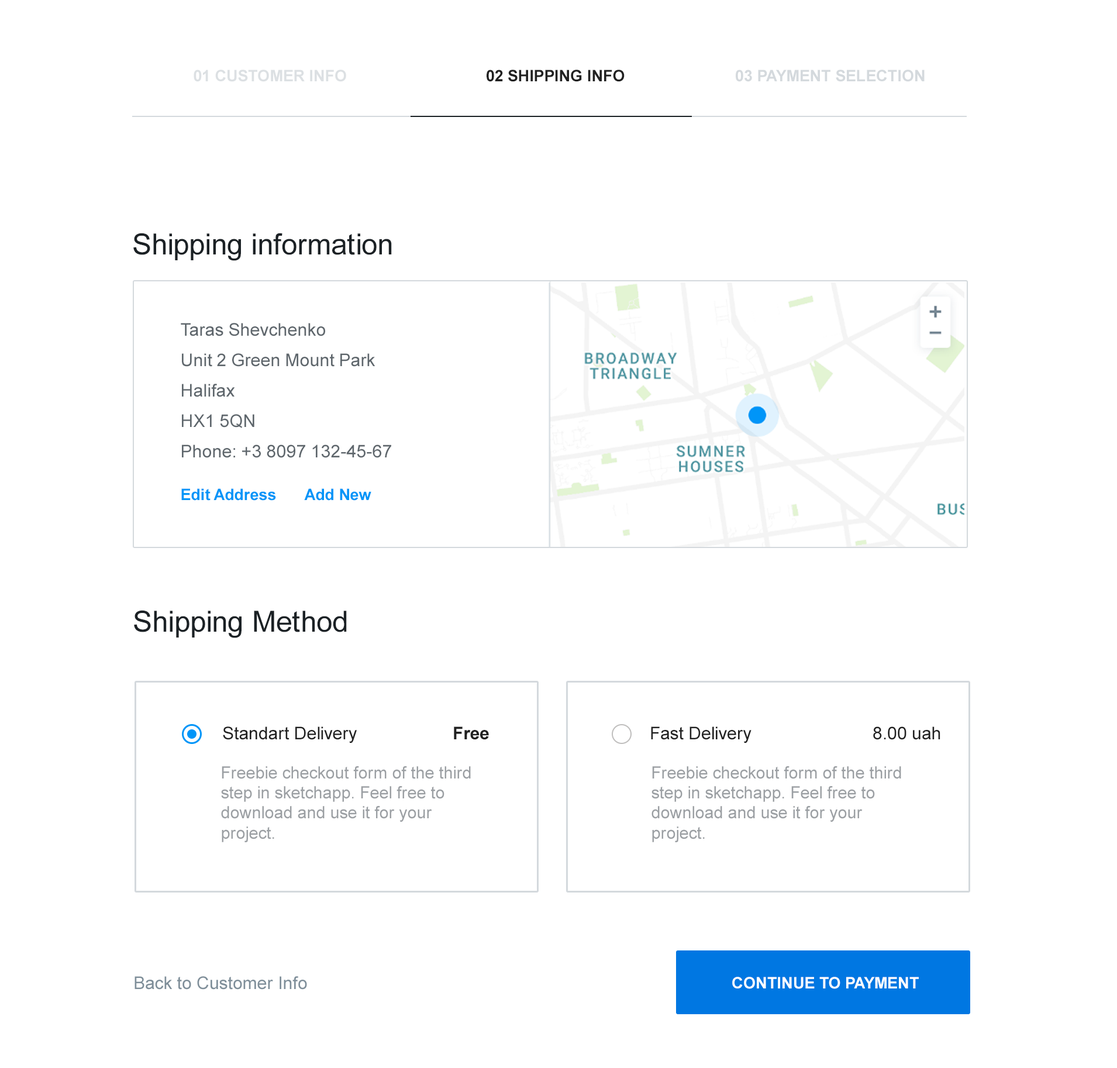
<style>
.page{position:relative;width:1117px;height:1068px;background:#ffffff}
.page>*{position:absolute;margin:0}
.t1{font:15.8px "Arial-BoldMT";color:#dce0e3;text-transform:uppercase}
.t2{font:15.8px "Arial-BoldMT";color:#212121;text-transform:uppercase}
.t3{font:15.8px "Arial-BoldMT";color:#d4d9dd;text-transform:uppercase}
.t4{font:29.1px "ArialMT";color:#1b2125}
.t5{font:17.5px/30.4px "ArialMT";color:#5e666c}
.t6{font:15.8px "Arial-BoldMT";color:#0095f8}
.t7{font:17.5px "ArialMT";color:#212121}
.t8{font:17.5px "Arial-BoldMT";color:#212121}
.t9{font:16.7px "ArialMT";color:#9b9fa3}
.t10{font:17.5px "ArialMT";color:#7e8e99}
.t11{font:15.8px "Arial-BoldMT";color:#ffffff;text-transform:uppercase}
</style>
<div class="page">
<p class="t1" style="left:194px;top:70px;width:152px;height:12px">01 Customer info</p>
<p class="t2" style="left:486px;top:70px;width:138px;height:12px">02 Shipping info</p>
<p class="t3" style="left:736px;top:70px;width:188px;height:12px">03 Payment selection</p>
<p class="t4" style="left:133px;top:233px;width:259px;height:28px">Shipping information</p>
<p class="t5" style="left:181px;top:323px;width:210px;height:135px">Taras Shevchenko<br>Unit 2 Green Mount Park<br>Halifax<br>HX1 5QN<br>Phone: +3 8097 132-45-67</p>
<p class="t6" style="left:181px;top:488px;width:95px;height:13px">Edit Address</p>
<p class="t6" style="left:304px;top:488px;width:67px;height:13px">Add New</p>
<p class="t4" style="left:134px;top:610px;width:213px;height:28px">Shipping Method</p>
<p class="t7" style="left:223px;top:726px;width:134px;height:17px">Standart Delivery</p>
<p class="t8" style="left:454px;top:726px;width:35px;height:14px">Free</p>
<p class="t7" style="left:651px;top:726px;width:100px;height:17px">Fast Delivery</p>
<p class="t7" style="left:873px;top:726px;width:67px;height:14px">8.00 uah</p>
<p class="t9" style="left:221px;top:766px;width:250px;height:76px">Freebie checkout form of the third step in sketchapp. Feel free to download and use it for your project.</p>
<p class="t9" style="left:651px;top:766px;width:250px;height:76px">Freebie checkout form of the third step in sketchapp. Feel free to download and use it for your project.</p>
<p class="t10" style="left:134px;top:976px;width:173px;height:13px">Back to Customer Info</p>
<p class="t11" style="left:732px;top:976px;width:187px;height:13px">Continue to Payment</p>
</div>
